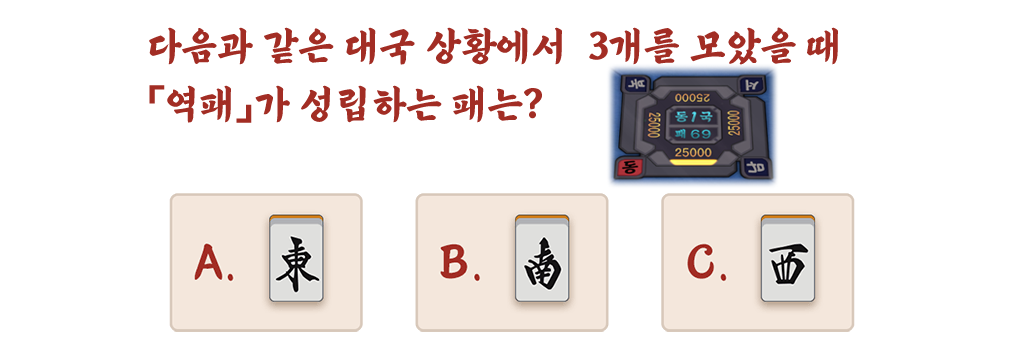
<style>
.page{position:relative;width:1024px;height:351px;background:#ffffff}
.page>*{position:absolute;margin:0}
.t1{font:40px/58px "Dokrip";letter-spacing:-0.015em;color:#a22d24}
</style>
<div class="page">
<p class="t1" style="left:149px;top:27px;width:689px;height:96px">다음과 같은 대국 상황에서  3개를 모았을 때 <br>「역패」가 성립하는 패는?</p>
</div>
